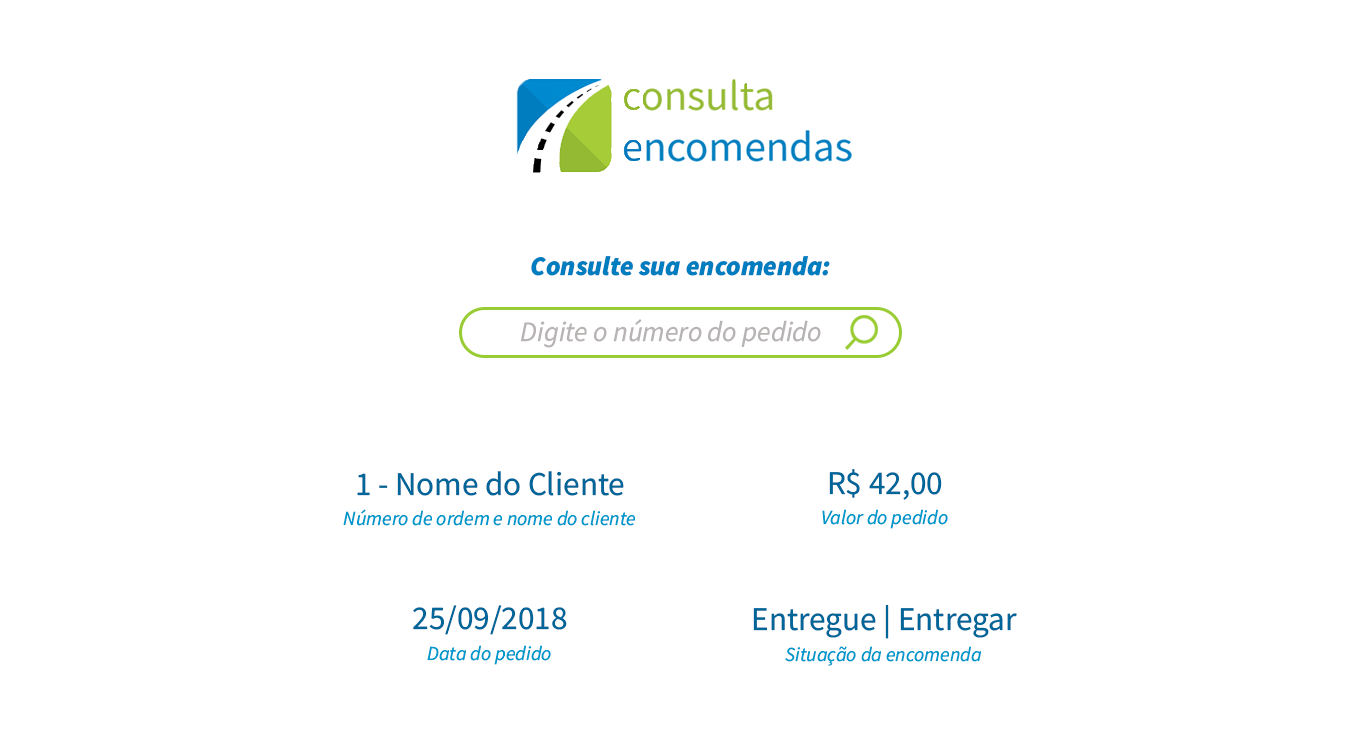
<style>
.page{position:relative;width:1360px;height:744px;background:#ffffff}
.page>*{position:absolute;margin:0}
.t1{font:26.9px "SourceSansItalic-BlackItalic";color:#007dbf}
.t2{font:28.1px "SourceSansItalic-Italic";color:#b8b4b4}
.t3{font:19.9px/30.5px "SourceSansItalic-Italic";color:#0099cc}
.t4{font:33.2px/30.5px "SourceSansRoman-Regular";color:#006699}
</style>
<div class="page">
<p class="t1" style="left:531px;top:256px;width:299px;height:20px">Consulte sua encomenda:</p>
<p class="t2" style="left:520px;top:319px;width:301px;height:29px">Digite o número do pedido</p>
<p class="t3" style="left:343px;top:471px;width:292px;height:55px;text-align:center"><span class="t4">1 - Nome do Cliente<br></span>Número de ordem e nome do cliente</p>
<p class="t3" style="left:822px;top:469px;width:126px;height:60px;text-align:center"><span class="t4">R$ 42,00<br></span>Valor do pedido</p>
<p class="t3" style="left:413px;top:605px;width:154px;height:60px;text-align:center"><span class="t4">25/09/2018<br></span>Data do pedido</p>
<p class="t3" style="left:753px;top:605px;width:264px;height:61px;text-align:center"><span class="t4">Entregue | Entregar<br></span>Situação da encomenda</p>
</div>
